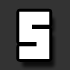
<style>
.page{position:relative;width:70px;height:70px;background:#333333}
.page>*{position:absolute;margin:0}
.t1{font:60px "04b19";color:#ffffff}
</style>
<div class="page">
<p class="t1" style="left:19px;top:11px;width:31px;height:48px">5</p>
</div>
